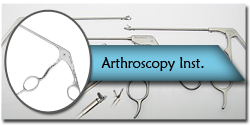
<style>
.page{position:relative;width:250px;height:125px;background:#ffffff}
.page>*{position:absolute;margin:0}
.t1{font:15px "MaiandraGD-Regular";color:#000000;scale:0.92 1}
</style>
<div class="page">
<p class="t1" style="left:101px;top:57px;width:103px;height:14px">Arthroscopy Inst.</p>
</div>
